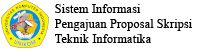
<style>
.page{position:relative;width:200px;height:50px;background:#ffffff}
.page>*{position:absolute;margin:0}
.t1{font:12.5px "TimesNewRomanPSMT";color:#000000}
</style>
<div class="page">
<p class="t1" style="left:55px;top:4px;width:137px;height:39px">Sistem Informasi<br>Pengajuan Proposal Skripsi<br>Teknik Informatika</p>
</div>
